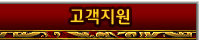
<style>
.page{position:relative;width:200px;height:40px}
.page>*{position:absolute;margin:0}
.t1{font:18px "2002L";color:#ffd321}
</style>
<div class="page">
<p class="t1" style="left:70px;top:9px;width:60px;height:16px">고객지원</p>
</div>
